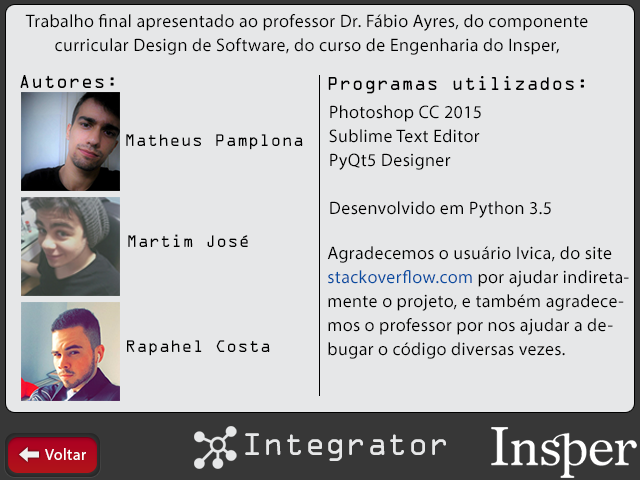
<style>
.page{position:relative;width:640px;height:480px;background:#e6e7e8}
.page>*{position:absolute;margin:0}
.t1{font:18px/24px "MyriadPro-Regular";letter-spacing:0.02em;color:#000000}
.t2{font:20px "OCRAExtended";letter-spacing:0.02em;color:#000000}
.t3{font:18px "OCRAExtended";letter-spacing:0.02em;color:#000000}
.t4{font:18px/24px "MyriadPro-Regular";letter-spacing:0.02em;color:#084da1}
.t5{font:33.5px "OCRAExtended";letter-spacing:0.02em;color:#e8e1e1}
.t6{font:16px "MyriadPro-Regular";letter-spacing:0.02em;color:#ffffff}
</style>
<div class="page">
<p class="t1" style="left:25px;top:14px;width:563px;height:41px;text-align:center">Trabalho final apresentado ao professor Dr. Fábio Ayres, do componente <br>curricular Design de Software, do curso de Engenharia do Insper,</p>
<p class="t2" style="left:20px;top:75px;width:94px;height:13px">Autores:</p>
<p class="t2" style="left:328px;top:76px;width:256px;height:18px">Programas utilizados:</p>
<p class="t1" style="left:329px;top:105px;width:222px;height:113px">Photoshop CC 2015<br>Sublime Text Editor<br>PyQt5 Designer<br><br>Desenvolvido em Python 3.5</p>
<p class="t3" style="left:126px;top:134px;width:177px;height:16px">Matheus Pamplona</p>
<p class="t3" style="left:128px;top:234px;width:120px;height:13px">Martim José</p>
<p class="t1" style="left:327px;top:246px;width:302px;height:113px">Agradecemos o usuário Ivica, do site<br><span class="t4">stackoverflow.com </span>por ajudar indireta-<br>mente o projeto, e também agradece-<br>mos o professor por nos ajudar a de-<br>bugar o código diversas vezes.</p>
<p class="t3" style="left:127px;top:340px;width:143px;height:16px">Rapahel Costa</p>
<p class="t5" style="left:245px;top:433px;width:201px;height:28px">Integrator</p>
<p class="t6" style="left:45px;top:448px;width:41px;height:12px">Voltar</p>
</div>
